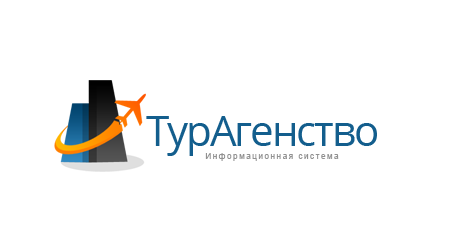
<style>
.page{position:relative;width:450px;height:250px;background:#ffffff}
.page>*{position:absolute;margin:0}
.t1{font:42px "OpenSans";letter-spacing:-0.05em;color:#135e8d}
.t2{font:8px "ArialMT";letter-spacing:0.2em;color:#919191}
</style>
<div class="page">
<p class="t1" style="left:146px;top:116px;width:231px;height:40px">ТурАгенство</p>
<p class="t2" style="left:205px;top:153px;width:134px;height:8px">Информационная система</p>
</div>
